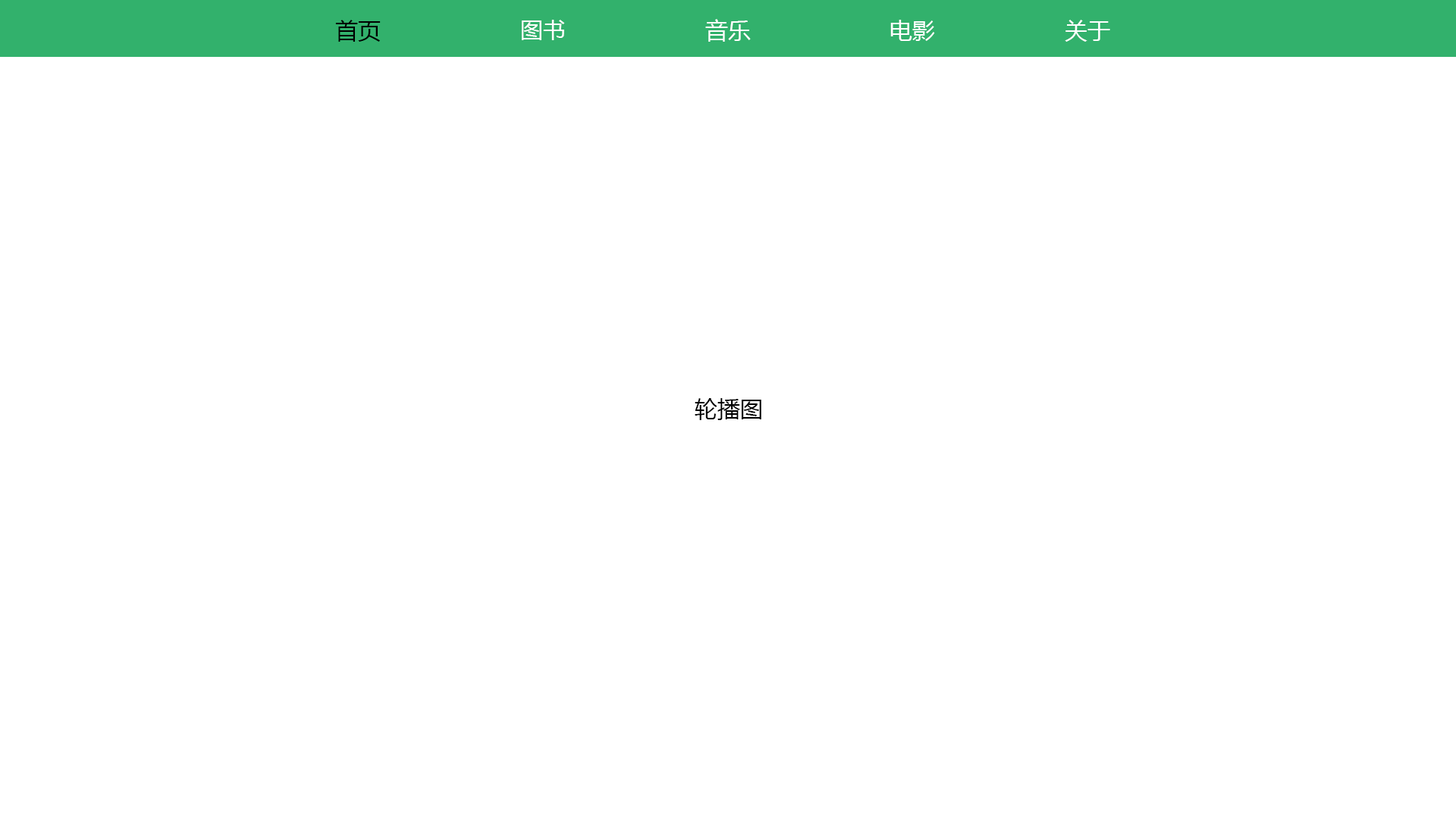
<style>
.page{position:relative;width:1456px;height:819px;background:#ffffff}
.page>*{position:absolute;margin:0}
.t1{font:22.7px "MicrosoftYaHei";color:#010101}
.t2{font:22.7px "MicrosoftYaHei";color:#ffffff}
.t3{font:22.7px "MicrosoftYaHei";color:#000000}
</style>
<div class="page">
<p class="t1" style="left:335px;top:20px;width:46px;height:22px">首页</p>
<p class="t2" style="left:522px;top:20px;width:43px;height:20px">图书</p>
<p class="t2" style="left:705px;top:19px;width:46px;height:23px">音乐</p>
<p class="t2" style="left:890px;top:20px;width:45px;height:21px">电影</p>
<p class="t2" style="left:1065px;top:20px;width:45px;height:22px">关于</p>
<p class="t3" style="left:695px;top:398px;width:66px;height:22px">轮播图</p>
</div>
